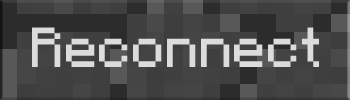
<style>
.page{position:relative;width:350px;height:100px}
.page>*{position:absolute;margin:0}
.t1{font:45px "Minecraftia";color:#dcdcdc}
</style>
<div class="page">
<p class="t1" style="left:32px;top:27px;width:287px;height:40px">Reconnect</p>
</div>
